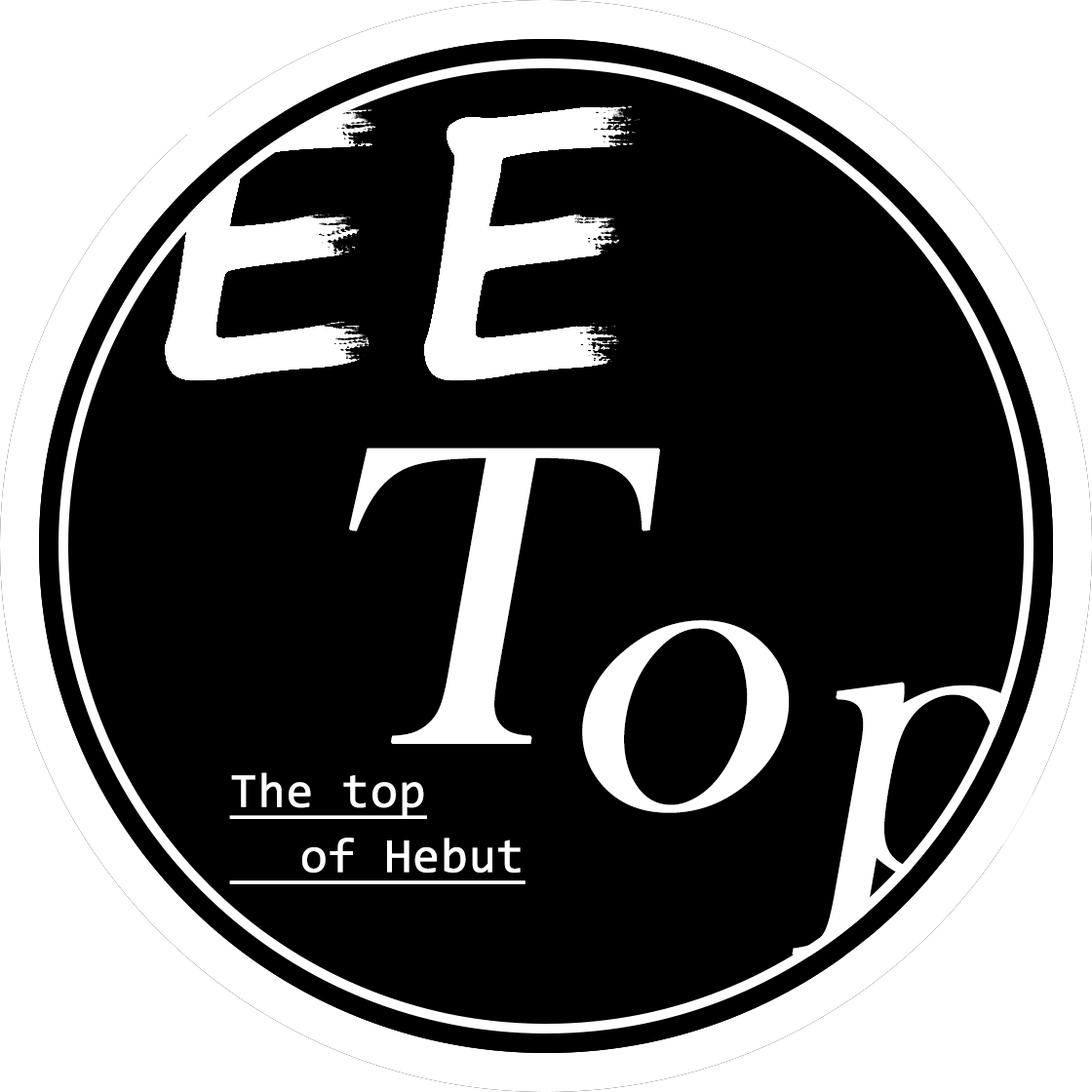
<style>
.page{position:relative;width:1092px;height:1092px;background:#000000}
.page>*{position:absolute;margin:0}
.t1{font:365.6px "SegoePrint-Bold";color:#ffffff;font-weight:bold}
.t2{font:438.7px/65px "BaskOldFace";color:#ffffff;font-weight:bold;font-style:italic}
.t3{font:48.7px/65px "Consolas";color:#ffffff;font-weight:bold;text-decoration:underline}
</style>
<div class="page">
<p class="t1" style="left:165px;top:103px;width:482px;height:278px">EE</p>
<p class="t2" style="left:349px;top:448px;width:689px;height:508px">T<br>  o<br>    p</p>
<p class="t3" style="left:229px;top:772px;width:297px;height:112px">The top<br>  of Hebut</p>
</div>
